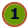
<style>
.page{position:relative;width:28px;height:28px;background:#ffffff}
.page>*{position:absolute;margin:0}
.t1{font:14.7px "Verdana-Bold";color:#000333}
</style>
<div class="page">
<p class="t1" style="left:11px;top:8px;width:8px;height:11px">1</p>
</div>
